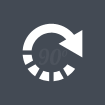
<style>
.page{position:relative;width:105px;height:105px;background:#434a54}
.page>*{position:absolute;margin:0}
.t1{font:21.9px "Lobster1.4";color:#4d535d}
</style>
<div class="page">
<p class="t1" style="left:39px;top:48px;width:29px;height:17px">90°</p>
</div>
